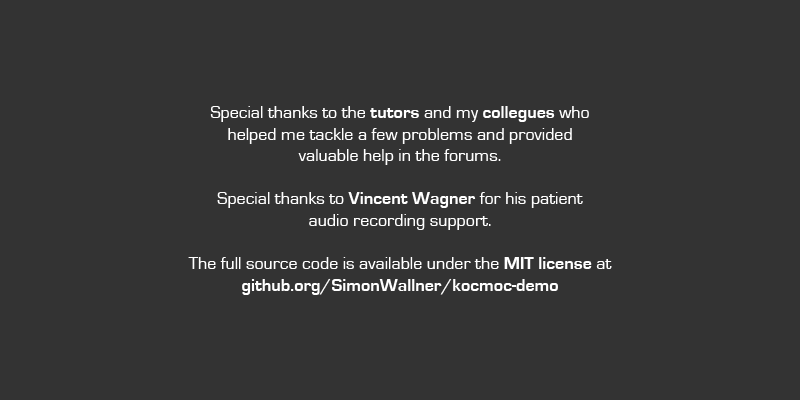
<style>
.page{position:relative;width:800px;height:400px;background:#333333}
.page>*{position:absolute;margin:0}
.t1{font:18px "EurostileRegular";color:#ffffff}
.t2{font:18px "EurostileBold";color:#ffffff}
</style>
<div class="page">
<p class="t1" style="left:188px;top:106px;width:424px;height:189px;text-align:center">Special thanks to the <span class="t2">tutors</span> and my <span class="t2">collegues</span> who<br>helped me tackle a few problems and provided<br>valuable help in the forums.<br><br>Special thanks to <span class="t2">Vincent Wagner </span>for his patient<br>audio recording support.<br><br>The full source code is available under the <span class="t2">MIT license</span> at<br><span class="t2">github.org/SimonWallner/kocmoc-demo</span></p>
</div>
